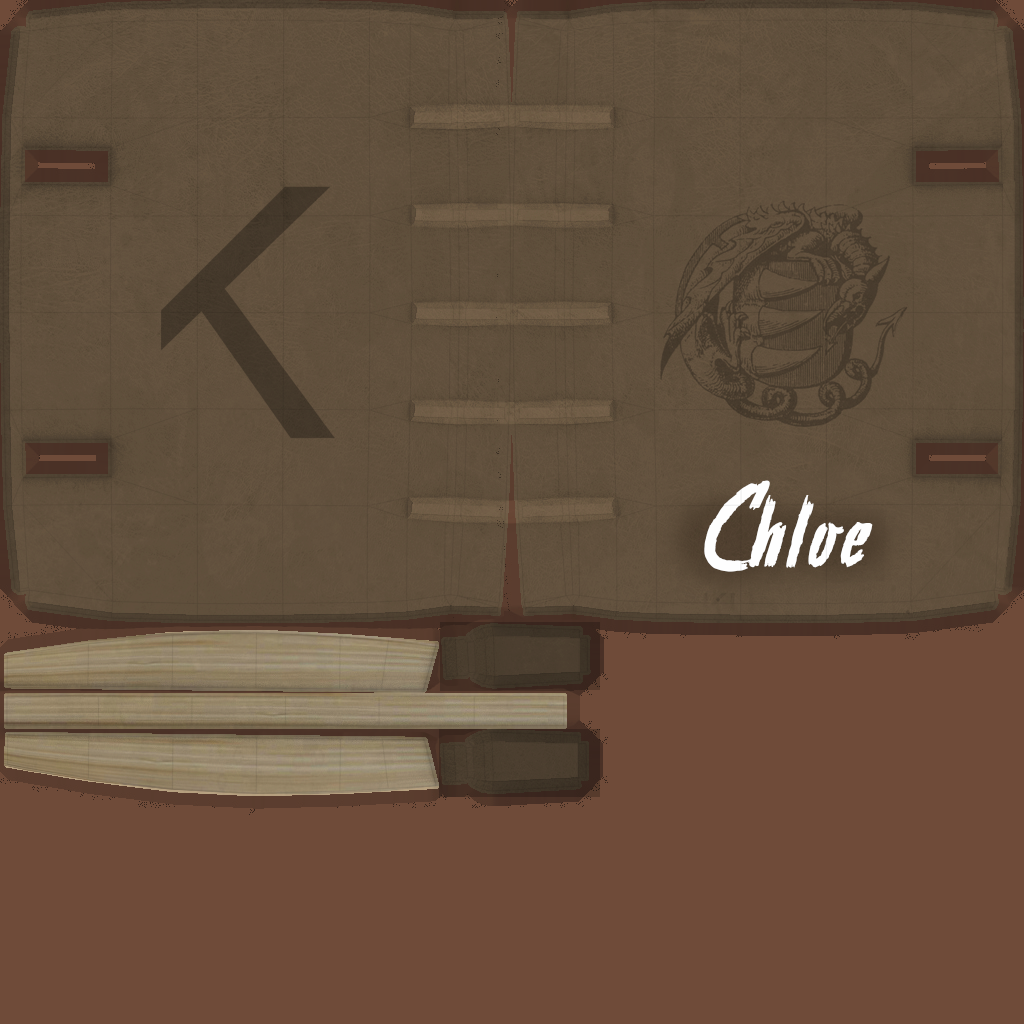
<style>
.page{position:relative;width:1024px;height:1024px;background:#6f4b39}
.page>*{position:absolute;margin:0}
.t1{font:163px "Stranger-back-in-the-Night";letter-spacing:0.04em;color:#ffffff}
</style>
<div class="page">
<p class="t1" style="left:704px;top:480px;width:169px;height:92px">Chloe</p>
</div>
